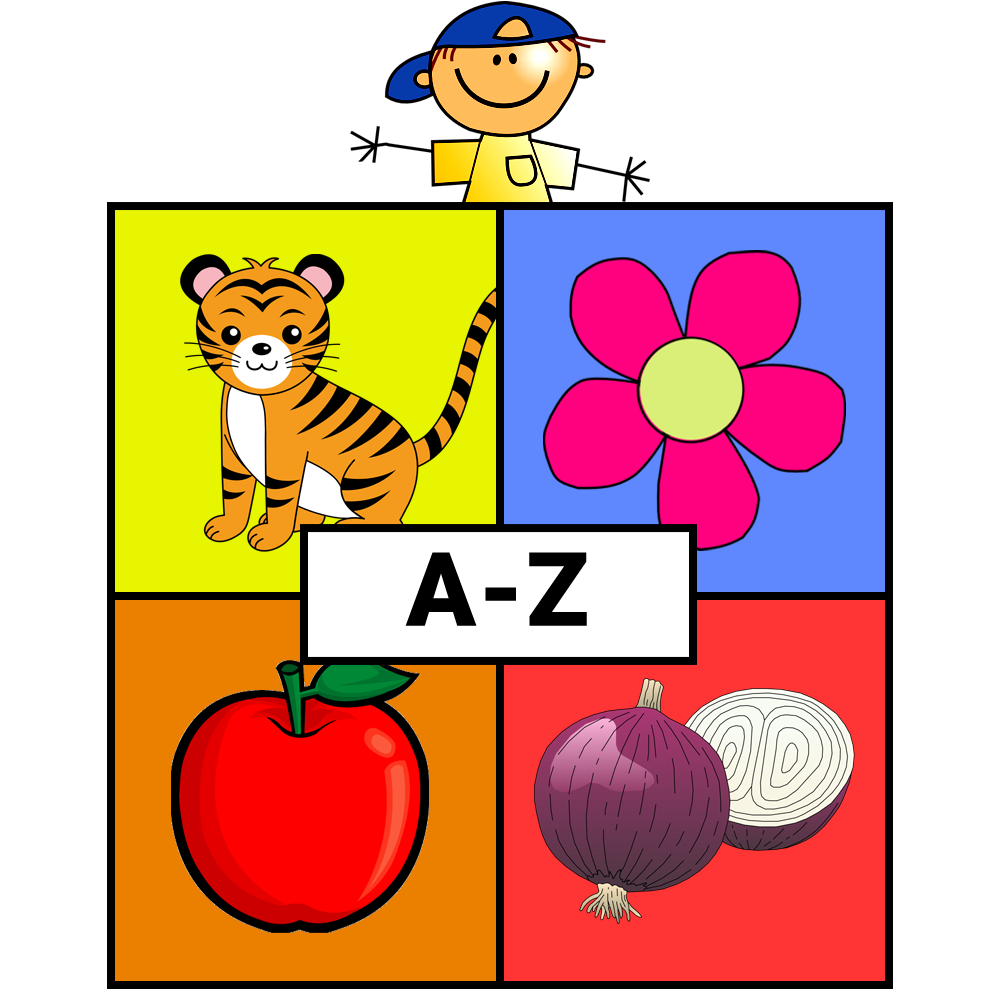
<style>
.page{position:relative;width:1000px;height:1000px;background:#ffffff}
.page>*{position:absolute;margin:0}
.t1{font:102.8px "Roboto-Black";letter-spacing:0.02em;color:#000000}
</style>
<div class="page">
<p class="t1" style="left:405px;top:552px;width:182px;height:74px">A-Z</p>
</div>
